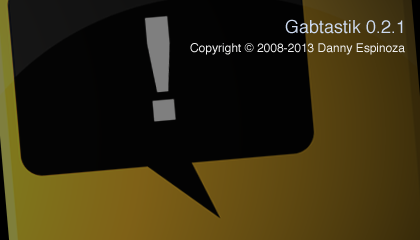
<style>
.page{position:relative;width:420px;height:240px}
.page>*{position:absolute;margin:0}
.t1{font:18px "Helvetica";color:#ccd9ef}
.t2{font:12px "Helvetica";color:#efefef}
</style>
<div class="page">
<p class="t1" style="left:285px;top:19px;width:118px;height:15px">Gabtastik 0.2.1</p>
<p class="t2" style="left:190px;top:43px;width:215px;height:12px">Copyright © 2008-2013 Danny Espinoza</p>
</div>
